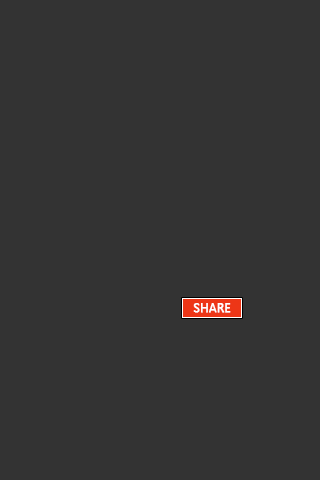
<style>
.page{position:relative;width:320px;height:480px;background:#333333}
.page>*{position:absolute;margin:0}
.t1{font:12px "SegoeUI";color:#ffffff;text-transform:uppercase;font-weight:bold}
</style>
<div class="page">
<p class="t1" style="left:193px;top:303px;width:38px;height:10px">SHARE</p>
</div>
